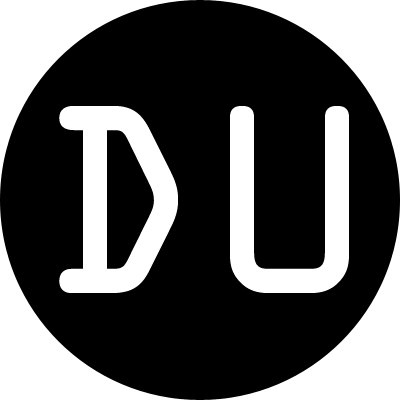
<style>
.page{position:relative;width:400px;height:400px;background:#000000}
.page>*{position:absolute;margin:0}
.t1{font:240.4px "OCRAStd";color:#ffffff}
</style>
<div class="page">
<p class="t1" style="left:59px;top:106px;width:290px;height:187px">DU</p>
</div>
